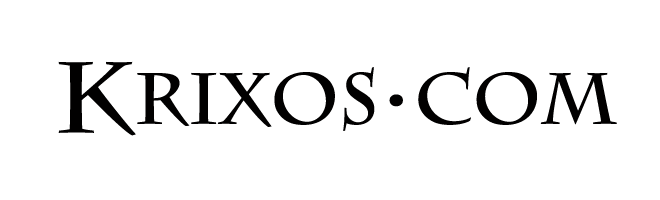
<style>
.page{position:relative;width:660px;height:200px;background:#ffffff}
.page>*{position:absolute;margin:0}
.t1{font:72px "CharlemagneStd-Bold";color:#010000}
.t2{font:72px "Ebrima-Bold";color:#010000}
</style>
<div class="page">
<p class="t1" style="left:137px;top:67px;width:480px;height:64px">RIXOS  COM</p>
<p class="t2" style="left:389px;top:94px;width:14px;height:13px">.</p>
</div>
